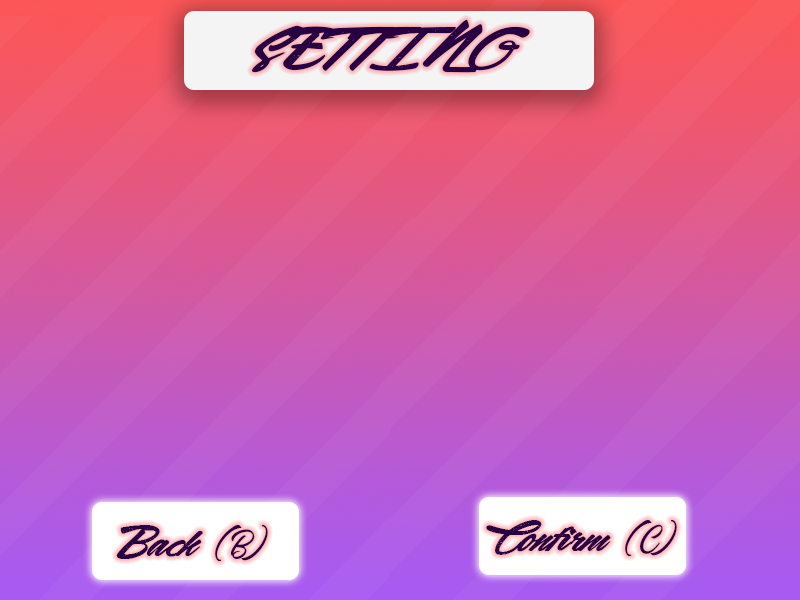
<style>
.page{position:relative;width:800px;height:600px}
.page>*{position:absolute;margin:0}
.t1{font:108.3px "Acceleration-&-Reaction";color:#270041}
.t2{font:83.3px "Acceleration-&-Reaction";color:#270041}
.t3{font:41.7px "Sangharia";color:#270041}
</style>
<div class="page">
<p class="t1" style="left:251px;top:19px;width:279px;height:54px">SETTING</p>
<p class="t2" style="left:486px;top:520px;width:191px;height:36px">Confirm <span class="t3">(C)</span></p>
<p class="t2" style="left:116px;top:525px;width:152px;height:36px">Back <span class="t3">(B)</span></p>
</div>
